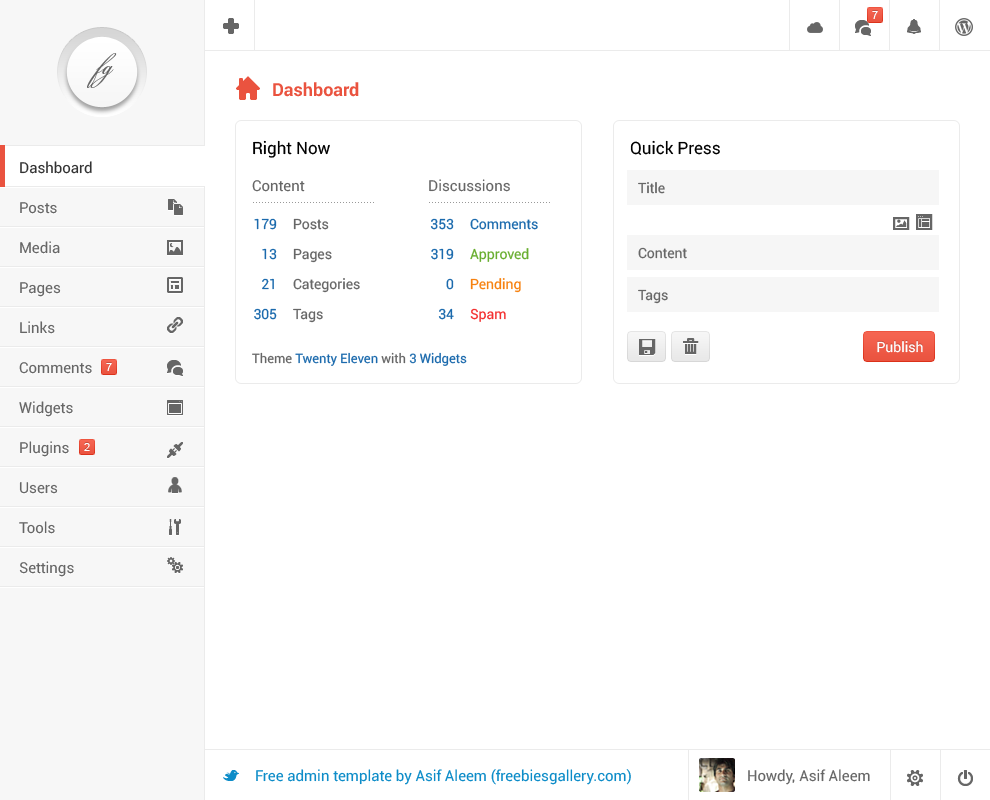
<style>
.page{position:relative;width:990px;height:800px;background:#ffffff}
.page>*{position:absolute;margin:0}
.t1{font:11px "ArialMT";color:#ffffff}
.t2{font:36px "BickhamScriptPro-Regular";color:#666666}
.t3{font:18px "Roboto-Bold";color:#ea533f}
.t4{font:17px "Roboto-Regular";color:#000000}
.t5{font:15px/40px "Roboto-Regular";color:#666666}
.t6{font:15px/40px "Roboto-Regular";color:#333333}
.t7{font:15px "Roboto-Regular";color:#666666}
.t8{font:14px "Roboto-Regular";color:#666666}
.t9{font:13px "Roboto-Regular";color:#999999}
.t10{font:14px/30px "Roboto-Regular";color:#1b6aad}
.t11{font:14px/30px "Roboto-Regular";color:#666666}
.t12{font:14px/30px "Roboto-Regular";color:#69ae30}
.t13{font:14px/30px "Roboto-Regular";color:#f6810f}
.t14{font:14px/30px "Roboto-Regular";color:#f32f2f}
.t15{font:14px "Roboto-Regular";color:#ffffff}
.t16{font:13px "Roboto-Regular";color:#1b6aad}
.t17{font:13px "Roboto-Regular";color:#666666}
.t18{font:15px "Roboto-Regular";color:#0d8cc8}
</style>
<div class="page">
<p class="t1" style="left:872px;top:11px;width:6px;height:8px">7</p>
<p class="t2" style="left:87px;top:53px;width:30px;height:35px">fg</p>
<p class="t3" style="left:273px;top:82px;width:86px;height:15px">Dashboard</p>
<p class="t4" style="left:253px;top:140px;width:77px;height:18px">Right Now</p>
<p class="t4" style="left:630px;top:140px;width:90px;height:15px">Quick Press</p>
<p class="t5" style="left:19px;top:161px;width:73px;height:416px"><span class="t6">Dashboard<br></span>Posts<br>Media<br>Pages<br>Links<br>Comments<br>Widgets<br>Plugins<br>Users<br>Tools<br>Settings</p>
<p class="t7" style="left:252px;top:180px;width:53px;height:12px">Content</p>
<p class="t7" style="left:429px;top:179px;width:81px;height:13px">Discussions</p>
<p class="t8" style="left:638px;top:182px;width:27px;height:12px">Title</p>
<p class="t9" style="left:253px;top:202px;width:121px;height:1px">.........................................</p>
<p class="t9" style="left:429px;top:202px;width:121px;height:1px">.........................................</p>
<p class="t10" style="left:254px;top:218px;width:23px;height:102px;text-align:right">179<br>13<br>21<br>305</p>
<p class="t11" style="left:293px;top:218px;width:67px;height:105px">Posts<br>Pages<br>Categories<br>Tags</p>
<p class="t10" style="left:430px;top:218px;width:24px;height:102px;text-align:right">353<br>319<br>0<br>34</p>
<p class="t10" style="left:470px;top:218px;width:68px;height:104px">Comments<br><span class="t12">Approved<br></span><span class="t13">Pending<br></span><span class="t14">Spam</span></p>
<p class="t8" style="left:638px;top:247px;width:49px;height:12px">Content</p>
<p class="t8" style="left:638px;top:289px;width:30px;height:15px">Tags</p>
<p class="t15" style="left:877px;top:341px;width:46px;height:12px">Publish</p>
<p class="t16" style="left:252px;top:352px;width:215px;height:14px"><span class="t17">Theme </span>Twenty Eleven<span class="t17"> with </span>3 Widgets</p>
<p class="t1" style="left:106px;top:363px;width:6px;height:8px">7</p>
<p class="t1" style="left:84px;top:443px;width:6px;height:8px">2</p>
<p class="t18" style="left:256px;top:769px;width:375px;height:16px">Free admin template by Asif Aleem (freebiesgallery.com)</p>
<p class="t7" style="left:748px;top:769px;width:122px;height:16px">Howdy, Asif Aleem</p>
</div>
